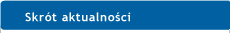
<style>
.page{position:relative;width:230px;height:33px;background:#0060a1}
.page>*{position:absolute;margin:0}
.t1{font:12px "TrebuchetMS-Bold";letter-spacing:0.05em;color:#ffffff}
</style>
<div class="page">
<p class="t1" style="left:25px;top:12px;width:106px;height:10px">Skrót aktualności</p>
</div>
